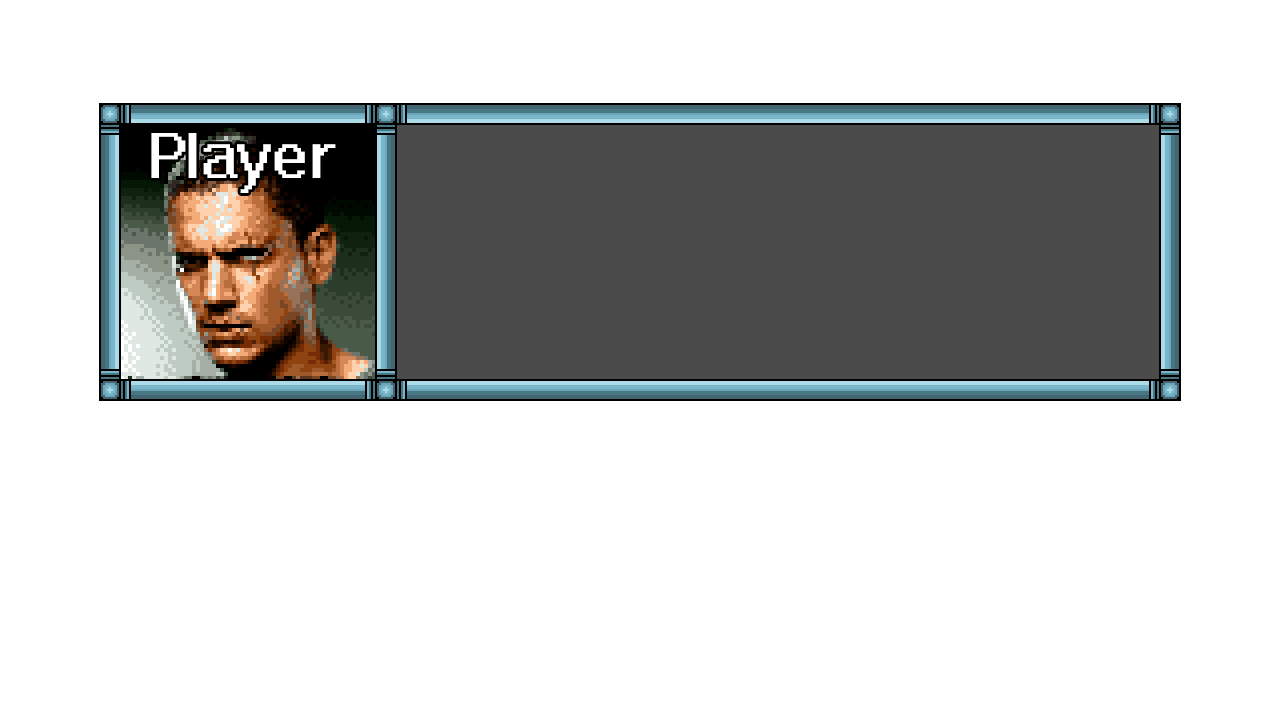
<style>
.page{position:relative;width:1280px;height:720px;background:#ffffff}
.page>*{position:absolute;margin:0}
.t1{font:60px "System";color:#ffffff}
</style>
<div class="page">
<p class="t1" style="left:151px;top:133px;width:185px;height:60px">Player</p>
</div>
